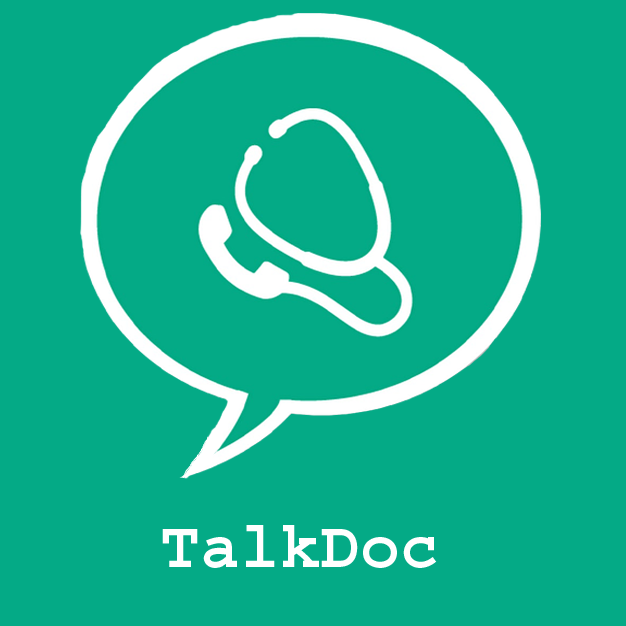
<style>
.page{position:relative;width:626px;height:626px;background:#04aa86}
.page>*{position:absolute;margin:0}
.t1{font:66.7px "Courier-Bold";color:#ffffff}
</style>
<div class="page">
<p class="t1" style="left:162px;top:525px;width:275px;height:43px">TalkDoc</p>
</div>
